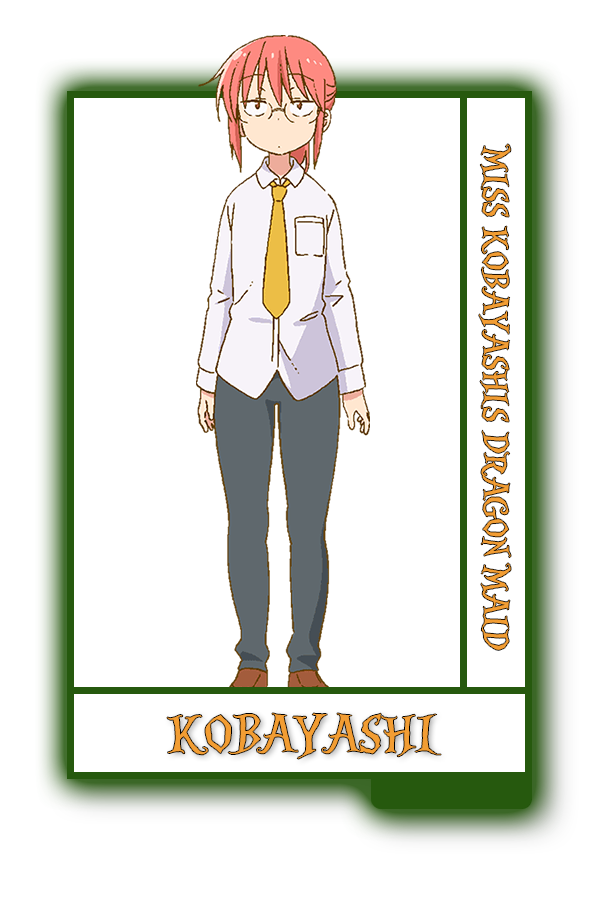
<style>
.page{position:relative;width:600px;height:900px;background:#ffffff}
.page>*{position:absolute;margin:0}
.t1{font:37.3px "AliceinWonderland";color:#f29d33}
.t2{font:56px "AliceinWonderland";color:#f29d33}
</style>
<div class="page">
<p class="t1" style="left:479px;top:144px;width:32px;height:506px;rotate:90deg">MISS KOBAYASHIS DRAGON MAID</p>
<p class="t2" style="left:167px;top:713px;width:274px;height:46px">KOBAYASHI</p>
</div>
